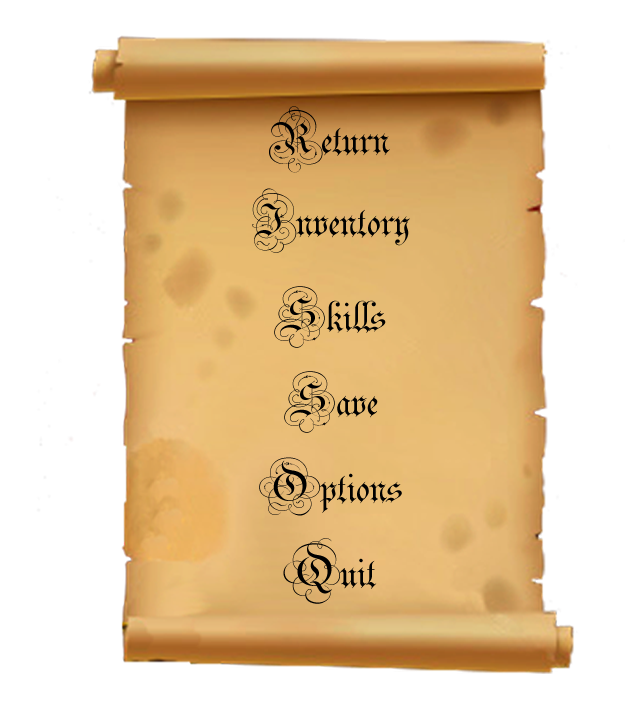
<style>
.page{position:relative;width:640px;height:720px;background:#ffffff}
.page>*{position:absolute;margin:0}
.t1{font:72px "Parchment-Regular";color:#000000}
</style>
<div class="page">
<p class="t1" style="left:269px;top:106px;width:121px;height:67px">Return</p>
<p class="t1" style="left:252px;top:188px;width:158px;height:65px">Inventory</p>
<p class="t1" style="left:274px;top:286px;width:112px;height:62px">Skills</p>
<p class="t1" style="left:284px;top:371px;width:94px;height:62px">Save</p>
<p class="t1" style="left:259px;top:457px;width:143px;height:59px">Options</p>
<p class="t1" style="left:283px;top:538px;width:94px;height:66px">Quit</p>
</div>
